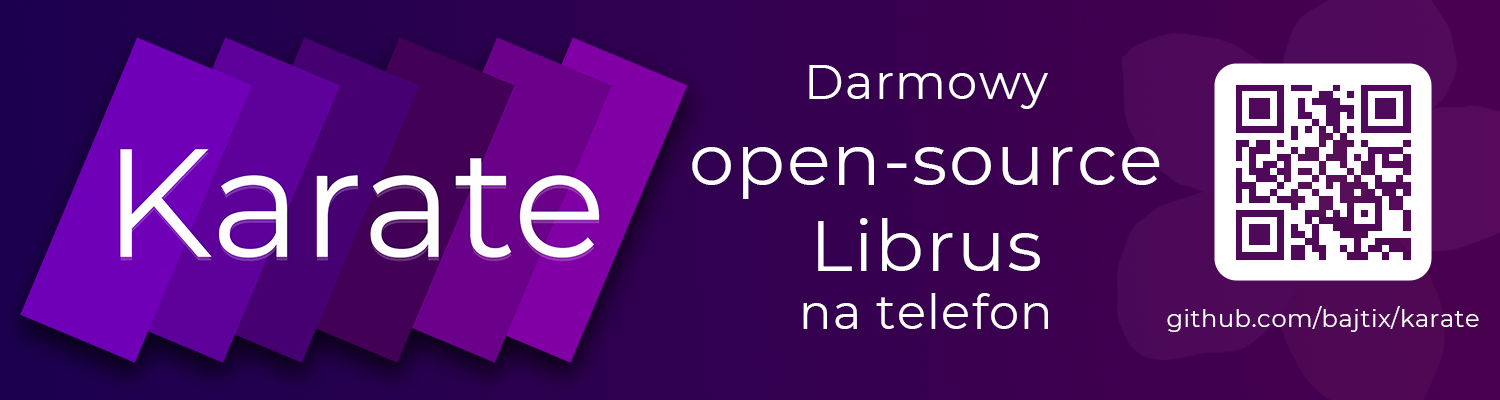
<style>
.page{position:relative;width:1500px;height:400px}
.page>*{position:absolute;margin:0}
.t1{font:72px "Montserrat-Regular";letter-spacing:0.025em;color:#ffffff}
.t2{font:48px "Montserrat-Regular";letter-spacing:0.025em;color:#ffffff}
.t3{font:24px "Montserrat-Regular";letter-spacing:0.025em;color:#ffffff}
</style>
<div class="page">
<p class="t1" style="left:692px;top:65px;width:468px;height:264px;text-align:center"><span class="t2">Darmowy<br></span>open-source Librus<br><span class="t2">na telefon</span></p>
<p class="t3" style="left:1167px;top:306px;width:312px;height:26px">github.com/bajtix/karate</p>
</div>
